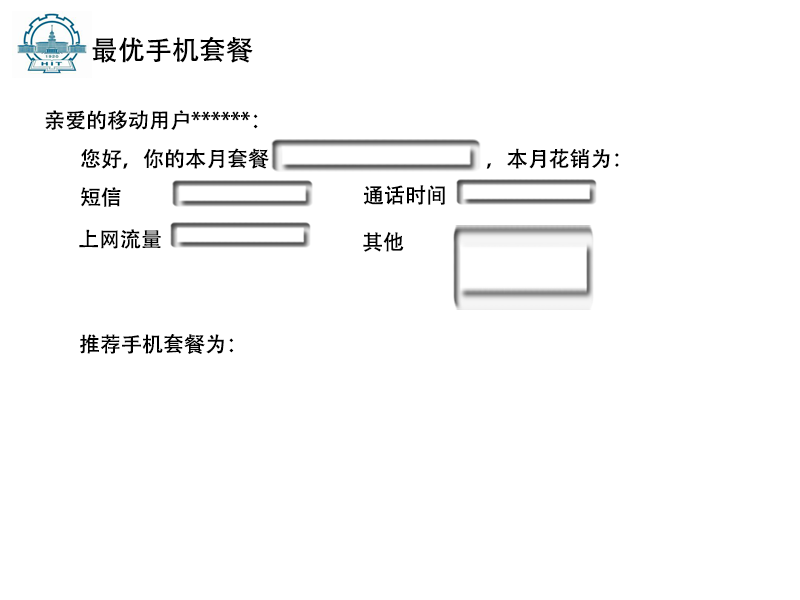
<style>
.page{position:relative;width:800px;height:600px;background:#ffffff}
.page>*{position:absolute;margin:0}
.t1{font:27px "AdobeHeitiStd-Regular";color:#000000}
.t2{font:21px/30px "AdobeHeitiStd-Regular";color:#000000}
.t3{font:21px "AdobeHeitiStd-Regular";color:#000000}
</style>
<div class="page">
<p class="t1" style="left:92px;top:36px;width:161px;height:27px">最优手机套餐</p>
<p class="t2" style="left:45px;top:110px;width:574px;height:59px">亲爱的移动用户******：<br> 您好，你的本月套餐                                              ，本月花销为：</p>
<p class="t3" style="left:363px;top:185px;width:82px;height:20px">通话时间</p>
<p class="t3" style="left:81px;top:187px;width:40px;height:20px">短信</p>
<p class="t3" style="left:79px;top:229px;width:82px;height:20px">上网流量</p>
<p class="t3" style="left:363px;top:232px;width:41px;height:20px">其他</p>
<p class="t3" style="left:80px;top:334px;width:154px;height:20px">推荐手机套餐为：</p>
</div>
